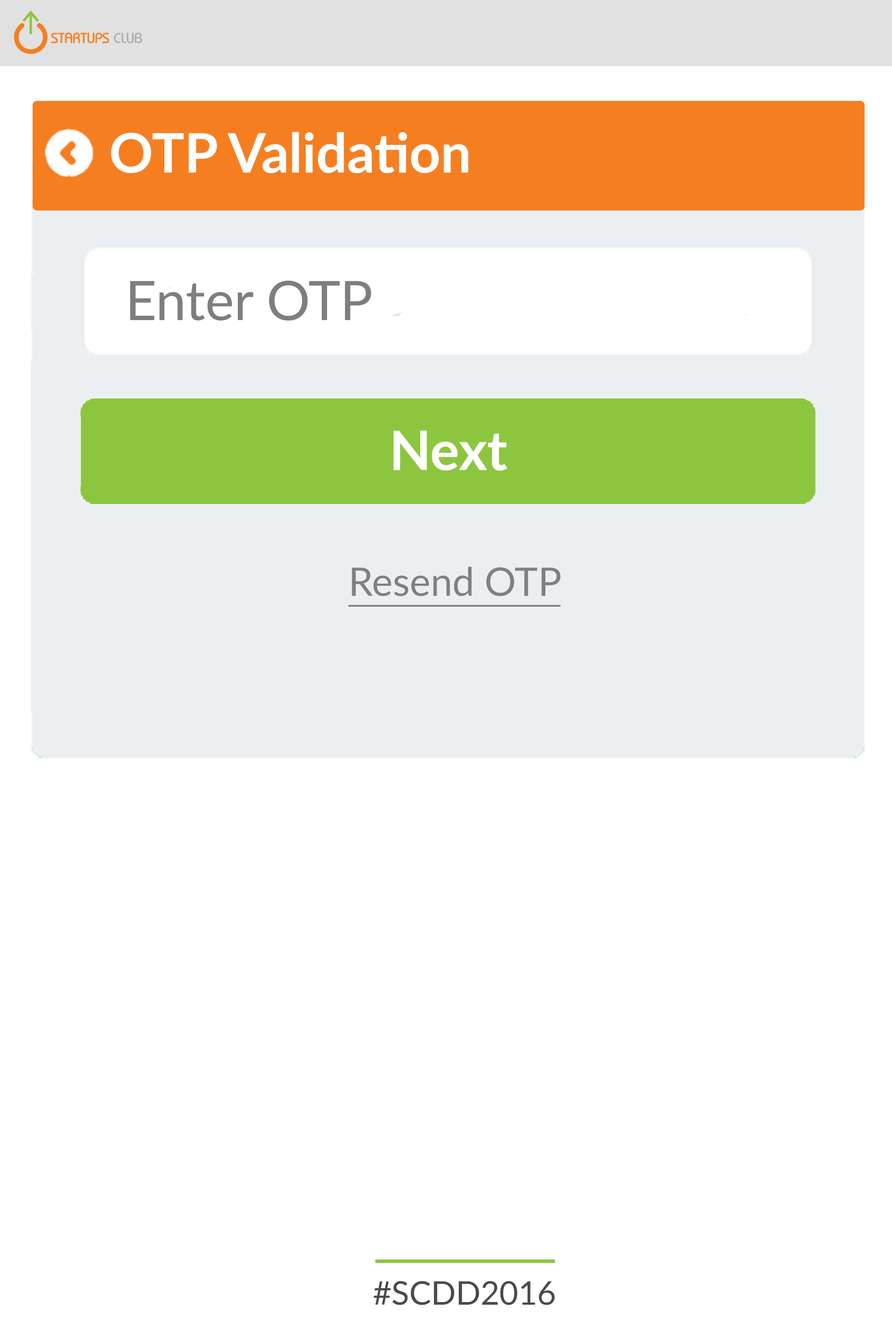
<style>
.page{position:relative;width:892px;height:1336px;background:#ffffff}
.page>*{position:absolute;margin:0}
.t1{font:54.4px "Lato-Bold";color:#ffffff}
.t2{font:54.4px "Lato-Regular";color:#7f7e7e}
.t3{font:39.4px "Lato-Regular";color:#818080;text-decoration:underline}
.t4{font:32.6px "Lato-Regular";color:#4a4b49}
</style>
<div class="page">
<p class="t1" style="left:111px;top:132px;width:358px;height:41px">OTP Validation</p>
<p class="t2" style="left:130px;top:281px;width:242px;height:40px">Enter OTP</p>
<p class="t1" style="left:394px;top:431px;width:113px;height:40px">Next</p>
<p class="t3" style="left:348px;top:567px;width:213px;height:40px">Resend OTP</p>
<p class="t4" style="left:374px;top:1281px;width:181px;height:25px">#SCDD2016</p>
</div>
